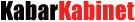
<style>
.page{position:relative;width:135px;height:22px;background:#ffffff}
.page>*{position:absolute;margin:0}
.t1{font:24px "Impact";color:#ef2222}
.t2{font:24px "Impact";color:#080000}
</style>
<div class="page">
<p class="t1" style="left:1px;top:1px;width:134px;height:20px"><span class="t2">Kabar</span>Kabinet</p>
</div>
